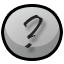
<style>
.page{position:relative;width:64px;height:64px;background:#ffffff}
.page>*{position:absolute;margin:0}
.t1{font:48px "Pristina-Regular";color:#242424}
</style>
<div class="page">
<p class="t1" style="left:23px;top:15px;width:20px;height:33px">?</p>
</div>
